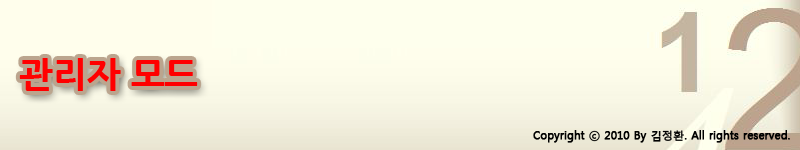
<style>
.page{position:relative;width:800px;height:150px}
.page>*{position:absolute;margin:0}
.t1{font:36px "NanumGothicExtraBold";color:#ff0000}
.t2{font:11px "MalgunGothicRegular";color:#000000;font-weight:bold}
</style>
<div class="page">
<p class="t1" style="left:19px;top:58px;width:179px;height:33px">관리자 모드</p>
<p class="t2" style="left:533px;top:130px;width:257px;height:13px">Copyright ⓒ 2010 By 김정환. All rights reserved.</p>
</div>
